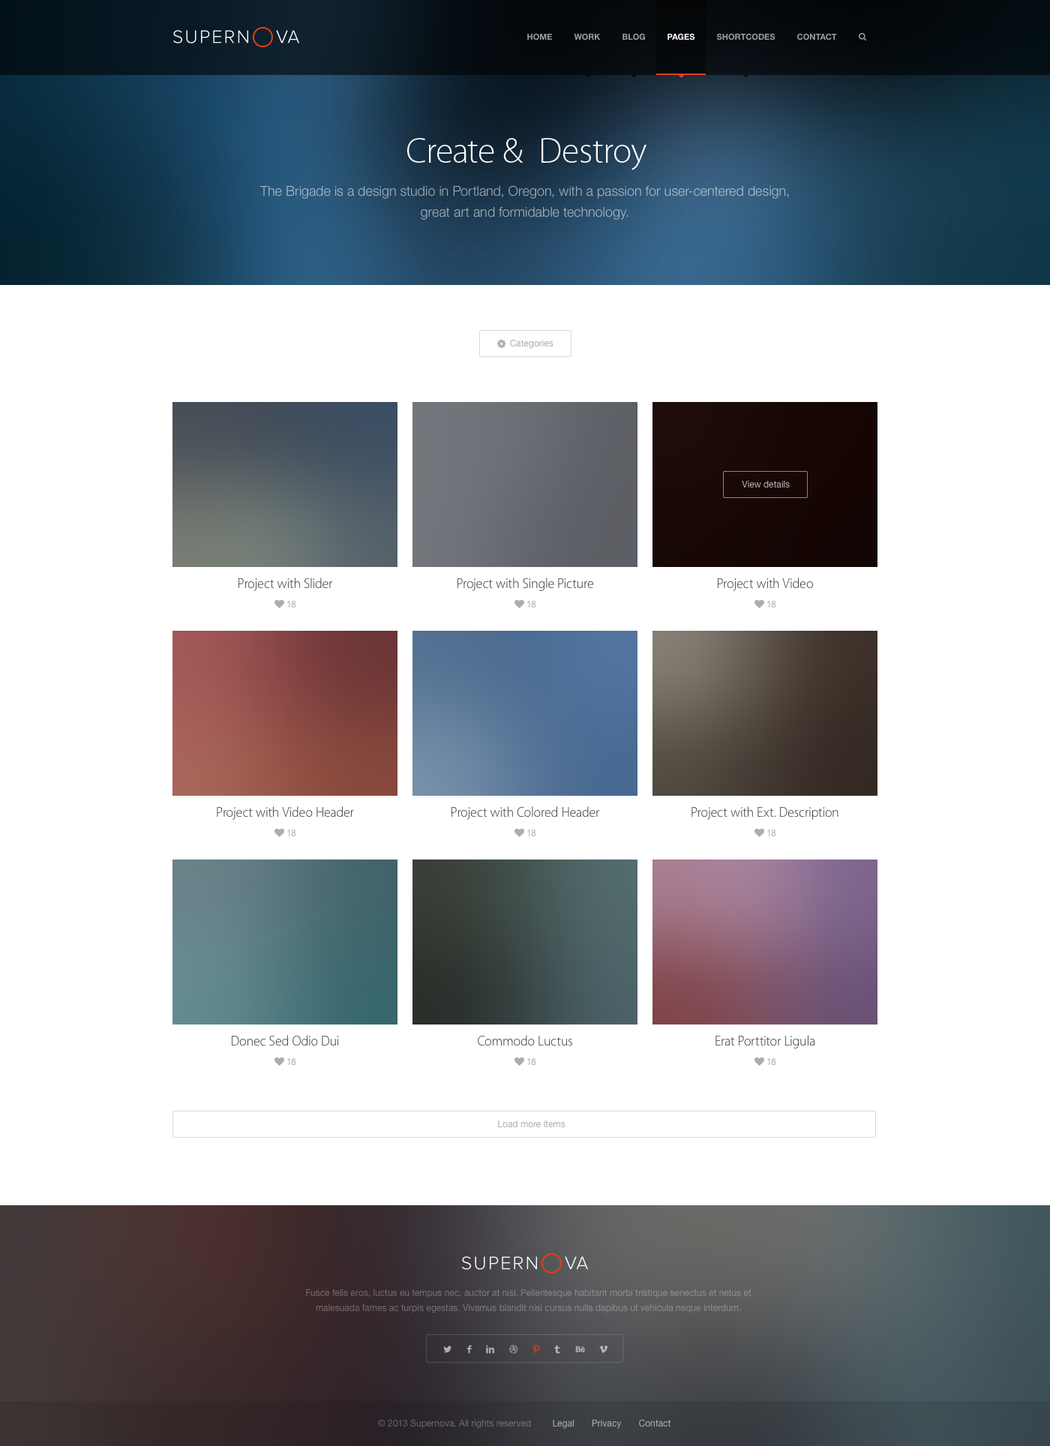
<style>
.page{position:relative;width:1050px;height:1446px;background:#ffffff}
.page>*{position:absolute;margin:0}
.t1{font:8.2px "HelveticaNeue-Bold";color:#9b9c9e;text-transform:uppercase}
.t2{font:8.2px "HelveticaNeue-Bold";color:#9b9d9e;text-transform:uppercase}
.t3{font:8.2px "HelveticaNeue-Bold";color:#9b9d9f;text-transform:uppercase}
.t4{font:8.2px "HelveticaNeue-Bold";color:#ffffff;text-transform:uppercase}
.t5{font:8.2px "HelveticaNeue-Bold";color:#9c9d9f;text-transform:uppercase}
.t6{font:36px "MyriadPro-Light";color:#ffffff}
.t7{font:13.5px/21px "HelveticaNeue-Light";color:#a8b7c3}
.t8{font:9px "HelveticaNeue";color:#adadad}
.t9{font:9px "HelveticaNeue";color:#bab5b4}
.t10{font:13.5px "MyriadPro-Light";color:#333333}
.t11{font:13.5px "MyriadPro-Light"}
.t12{font:9px/15px "HelveticaNeue";color:#838386}
.t13{font:9px "HelveticaNeue";color:#6f6f73}
.t14{font:9px "HelveticaNeue";color:#b1b2b4}
</style>
<div class="page">
<p class="t1" style="left:527px;top:33px;width:25px;height:7px">Home</p>
<p class="t2" style="left:574px;top:33px;width:27px;height:7px">Work</p>
<p class="t3" style="left:622px;top:33px;width:23px;height:7px">Blog</p>
<p class="t4" style="left:668px;top:33px;width:27px;height:7px">Pages</p>
<p class="t5" style="left:716px;top:33px;width:60px;height:7px">Shortcodes</p>
<p class="t2" style="left:797px;top:33px;width:40px;height:7px">Contact</p>
<p class="t6" style="left:407px;top:138px;width:239px;height:32px">Create &amp;  Destroy</p>
<p class="t7" style="left:260px;top:185px;width:529px;height:35px;text-align:center">The Brigade is a design studio in Portland, Oregon, with a passion for user-centered design, great art and formidable technology.</p>
<p class="t8" style="left:510px;top:339px;width:44px;height:10px">Categories</p>
<p class="t9" style="left:742px;top:481px;width:48px;height:7px">View details</p>
<p class="t10" style="left:238px;top:578px;width:95px;height:13px">Project with Slider</p>
<p class="t11" style="left:458px;top:578px;width:135px;height:13px">Project with Single Picture</p>
<p class="t11" style="left:718px;top:578px;width:95px;height:13px">Project with Video</p>
<p class="t8" style="left:287px;top:601px;width:9px;height:7px">18</p>
<p class="t8" style="left:527px;top:601px;width:9px;height:7px">18</p>
<p class="t8" style="left:767px;top:601px;width:9px;height:7px">18</p>
<p class="t10" style="left:217px;top:806px;width:137px;height:14px">Project with Video Header</p>
<p class="t10" style="left:452px;top:806px;width:148px;height:14px">Project with Colored Header</p>
<p class="t10" style="left:692px;top:806px;width:146px;height:14px">Project with Ext. Description</p>
<p class="t8" style="left:287px;top:830px;width:9px;height:7px">18</p>
<p class="t8" style="left:527px;top:830px;width:9px;height:7px">18</p>
<p class="t8" style="left:767px;top:830px;width:9px;height:7px">18</p>
<p class="t10" style="left:232px;top:1035px;width:106px;height:11px">Donec Sed Odio Dui</p>
<p class="t10" style="left:478px;top:1035px;width:94px;height:11px">Commodo Luctus</p>
<p class="t11" style="left:716px;top:1035px;width:98px;height:13px">Erat Porttitor Ligula</p>
<p class="t8" style="left:287px;top:1058px;width:9px;height:8px">18</p>
<p class="t8" style="left:527px;top:1058px;width:9px;height:8px">18</p>
<p class="t8" style="left:767px;top:1058px;width:9px;height:8px">18</p>
<p class="t8" style="left:498px;top:1120px;width:68px;height:8px">Load more items</p>
<p class="t12" style="left:306px;top:1289px;width:446px;height:24px;text-align:center">Fusce felis eros, luctus eu tempus nec, auctor at nisl. Pellentesque habitant morbi tristique senectus et netus et malesuada fames ac turpis egestas. Vivamus blandit nisi cursus nulla dapibus ut vehicula neque interdum.</p>
<p class="t13" style="left:378px;top:1419px;width:153px;height:10px">© 2013 Supernova. All rights reserved</p>
<p class="t14" style="left:553px;top:1419px;width:118px;height:10px">Legal       Privacy       Contact</p>
</div>
